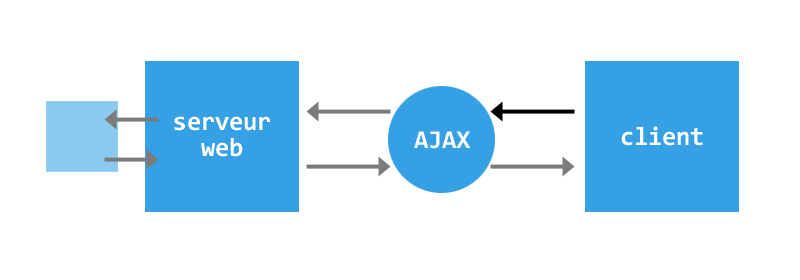
<style>
.page{position:relative;width:800px;height:280px;background:#ffffff}
.page>*{position:absolute;margin:0}
.t1{font:26px/26px "Consolas-Bold";letter-spacing:-0.01em;color:#ffffff}
.t2{font:26px "Consolas-Bold";letter-spacing:-0.01em;color:#ffffff}
</style>
<div class="page">
<p class="t1" style="left:174px;top:116px;width:96px;height:41px;text-align:center">serveur<br>web</p>
<p class="t2" style="left:621px;top:126px;width:82px;height:20px">client</p>
<p class="t2" style="left:414px;top:131px;width:57px;height:18px">AJAX</p>
</div>
